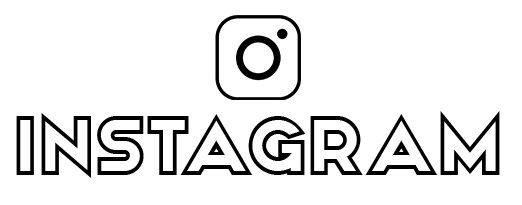
<style>
.page{position:relative;width:522px;height:205px;background:#ffffff}
.page>*{position:absolute;margin:0}
.t1{font:85px "Avalon-Regular";color:#000000}
</style>
<div class="page">
<p class="t1" style="left:16px;top:111px;width:484px;height:67px">Instagram</p>
</div>
